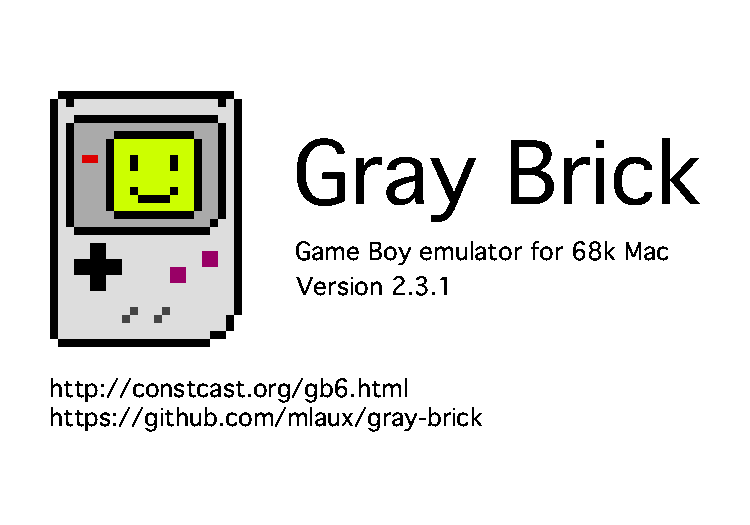
<style>
.page{position:relative;width:750px;height:525px;background:#ffffff}
.page>*{position:absolute;margin:0}
.t1{font:84px "Geneva";color:#000000}
.t2{font:24px "Geneva";color:#000000}
</style>
<div class="page">
<p class="t1" style="left:296px;top:137px;width:404px;height:85px">Gray Brick</p>
<p class="t2" style="left:296px;top:241px;width:373px;height:25px">Game Boy emulator for 68k Mac</p>
<p class="t2" style="left:296px;top:276px;width:151px;height:20px">Version 2.3.1</p>
<p class="t2" style="left:50px;top:378px;width:433px;height:54px">http://constcast.org/gb6.html<br>https://github.com/mlaux/gray-brick</p>
</div>
